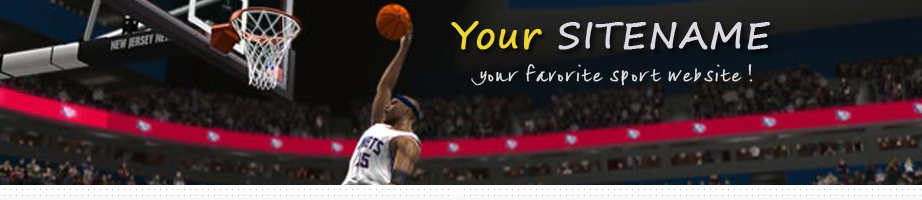
<style>
.page{position:relative;width:922px;height:200px}
.page>*{position:absolute;margin:0}
.t1{font:36px "SegoePrint";letter-spacing:0.025em;color:#dad9e2;font-weight:bold}
.t2{font:36px "SegoePrint";letter-spacing:0.025em;color:#edd43b;font-weight:bold}
.t3{font:19px "lizzielongstocking";letter-spacing:0.025em;color:#e0e0df;font-weight:bold}
</style>
<div class="page">
<p class="t1" style="left:451px;top:21px;width:319px;height:29px"><span class="t2">Your </span>SITENAME</p>
<p class="t3" style="left:471px;top:64px;width:282px;height:22px">your favorite sport website !</p>
</div>
